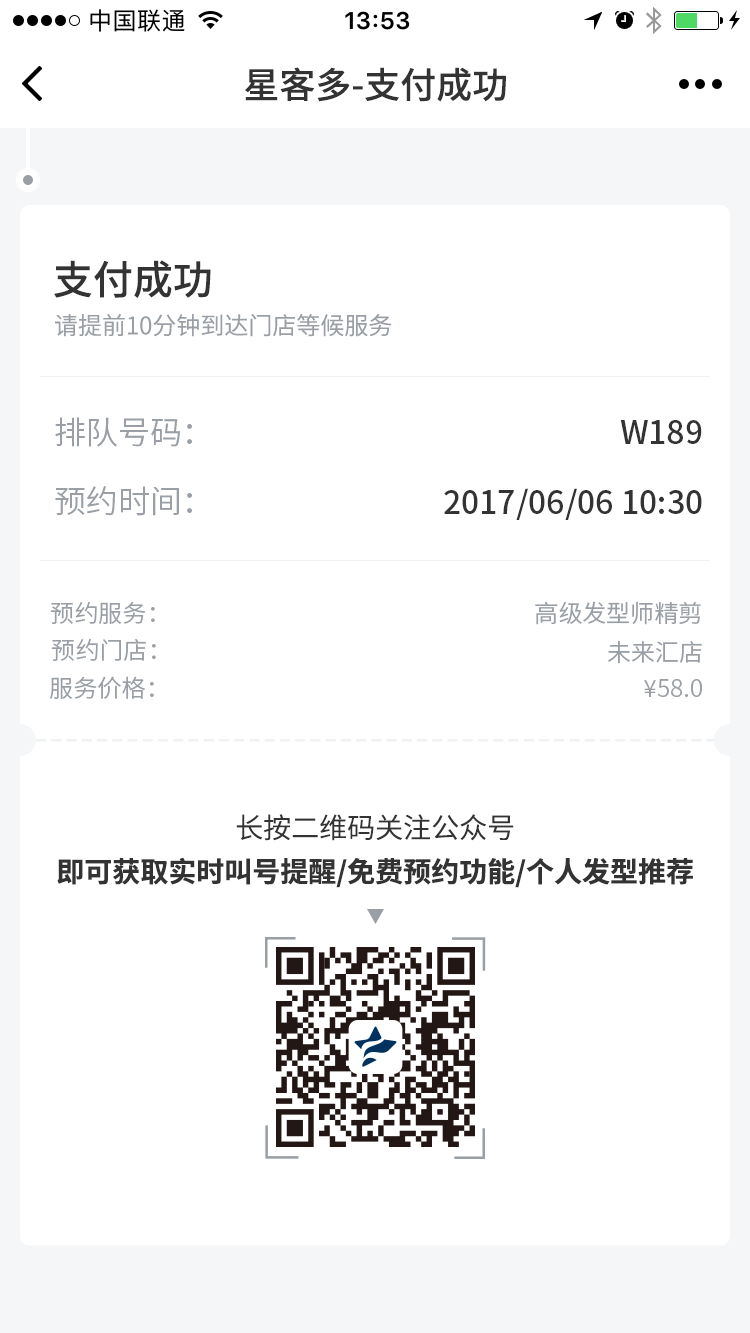
<style>
.page{position:relative;width:750px;height:1333px;background:#ffffff}
.page>*{position:absolute;margin:0}
.t1{font:36px "SourceHanSansCN-Medium";color:#333333}
.t2{font:40px "SourceHanSansCN-Medium";color:#333333}
.t3{font:24px "SourceHanSansCN-Normal";color:#999fa5}
.t4{font:32px "SourceHanSansCN-Normal";color:#999fa5}
.t5{font:32px "SourceHanSansCN-Medium";color:#333333}
.t6{font:28px/44px "SourceHanSansCN-Bold";color:#333333}
.t7{font:28px/44px "SourceHanSansCN-Normal";color:#333333}
</style>
<div class="page">
<p class="t1" style="left:245px;top:67px;width:261px;height:35px">星客多-支付成功</p>
<p class="t2" style="left:54px;top:260px;width:157px;height:38px">支付成功</p>
<p class="t3" style="left:55px;top:314px;width:337px;height:23px">请提前10分钟到达门店等候服务</p>
<p class="t4" style="left:55px;top:417px;width:137px;height:30px">排队号码：</p>
<p class="t5" style="left:620px;top:420px;width:82px;height:24px">W189</p>
<p class="t4" style="left:55px;top:486px;width:137px;height:30px">预约时间：</p>
<p class="t5" style="left:444px;top:488px;width:258px;height:32px">2017/06/06 10:30</p>
<p class="t3" style="left:50px;top:601px;width:105px;height:23px">预约服务：</p>
<p class="t3" style="left:535px;top:601px;width:166px;height:24px">高级发型师精剪</p>
<p class="t3" style="left:51px;top:638px;width:105px;height:23px">预约门店：</p>
<p class="t3" style="left:608px;top:641px;width:94px;height:23px">未来汇店</p>
<p class="t3" style="left:50px;top:676px;width:104px;height:23px">服务价格：</p>
<p class="t3" style="left:644px;top:679px;width:58px;height:18px">¥58.0</p>
<p class="t6" style="left:57px;top:814px;width:636px;height:74px;text-align:center"><span class="t7">长按二维码关注公众号<br></span>即可获取实时叫号提醒/免费预约功能/个人发型推荐</p>
</div>
